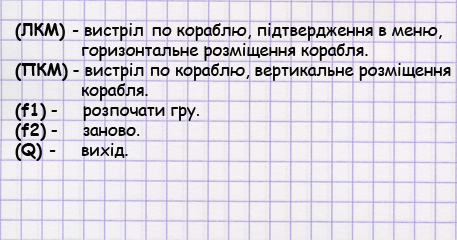
<style>
.page{position:relative;width:457px;height:240px}
.page>*{position:absolute;margin:0}
.t1{font:16.7px "ComicSansMS";color:#060606}
.t2{font:16.7px "ComicSansMS-Bold";color:#060606}
</style>
<div class="page">
<p class="t1" style="left:15px;top:23px;width:436px;height:138px"><span class="t2">(ЛКМ) </span>- вистріл по кораблю, підтвердження в меню, <br>       горизонтальне розміщення корабля.<br><span class="t2">(ПКМ)</span> - вистріл по кораблю, вертикальне розміщення<br>       корабля.<br><span class="t2">(f1)</span> -     розпочати гру.<br><span class="t2">(f2)</span> -     заново.<br><span class="t2">(Q) </span>-     вихід.</p>
</div>
